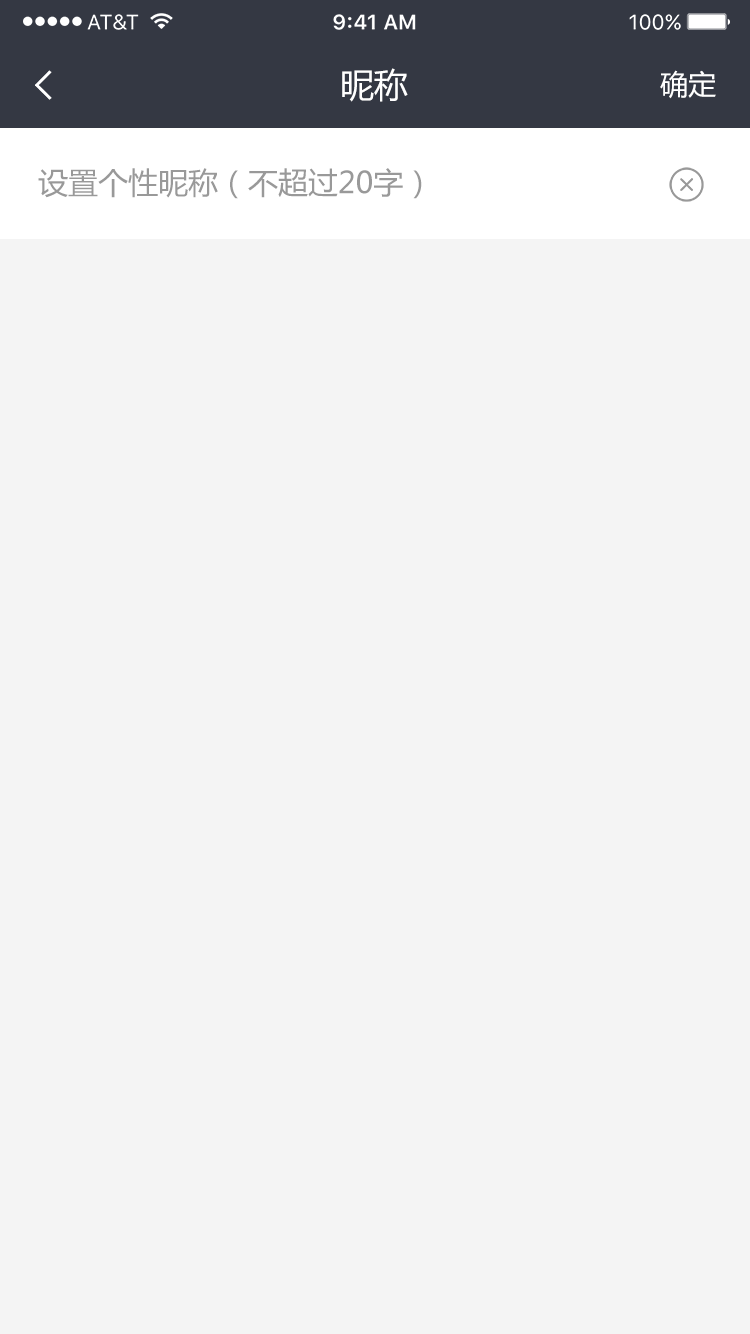
<style>
.page{position:relative;width:750px;height:1334px;background:#f4f4f4}
.page>*{position:absolute;margin:0}
.t1{font:34px "MicrosoftYaHei";color:#ffffff}
.t2{font:28px "MicrosoftYaHei";color:#ffffff}
.t3{font:30px "MicrosoftYaHei";color:#999999}
</style>
<div class="page">
<p class="t1" style="left:342px;top:68px;width:66px;height:34px">昵称</p>
<p class="t2" style="left:660px;top:70px;width:56px;height:29px">确定</p>
<p class="t3" style="left:38px;top:168px;width:384px;height:31px">设置个性昵称（不超过20字）</p>
</div>
